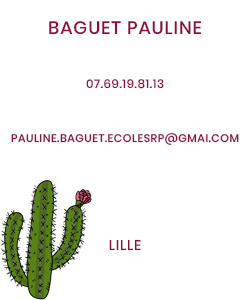
<style>
.page{position:relative;width:250px;height:300px;background:#ffffff}
.page>*{position:absolute;margin:0}
.t1{font:11px/27px "Poppins-Medium";letter-spacing:0.05em;color:#900c3e;text-transform:uppercase}
.t2{font:10px/27px "Poppins-Medium";letter-spacing:0.05em;color:#900c3e;text-transform:uppercase}
.t3{font:18px/27px "Poppins-Medium";letter-spacing:0.05em;color:#900c3e;text-transform:uppercase}
.t4{font:12px/27px "Poppins-Medium";letter-spacing:0.05em;color:#900c3e;text-transform:uppercase}
.t5{font:14px/27px "Poppins-Medium";letter-spacing:0.05em;color:#900c3e;text-transform:uppercase}
</style>
<div class="page">
<p class="t1" style="left:11px;top:21px;width:228px;height:230px;text-align:center"><span class="t2"><br></span><span class="t3">Baguet Pauline<br><br></span><span class="t4">07.69.19.81.13<br><br></span>pauline.baguet.ecolesrp@gmai.com<br><br><br><br><span class="t5">Lille</span></p>
</div>
